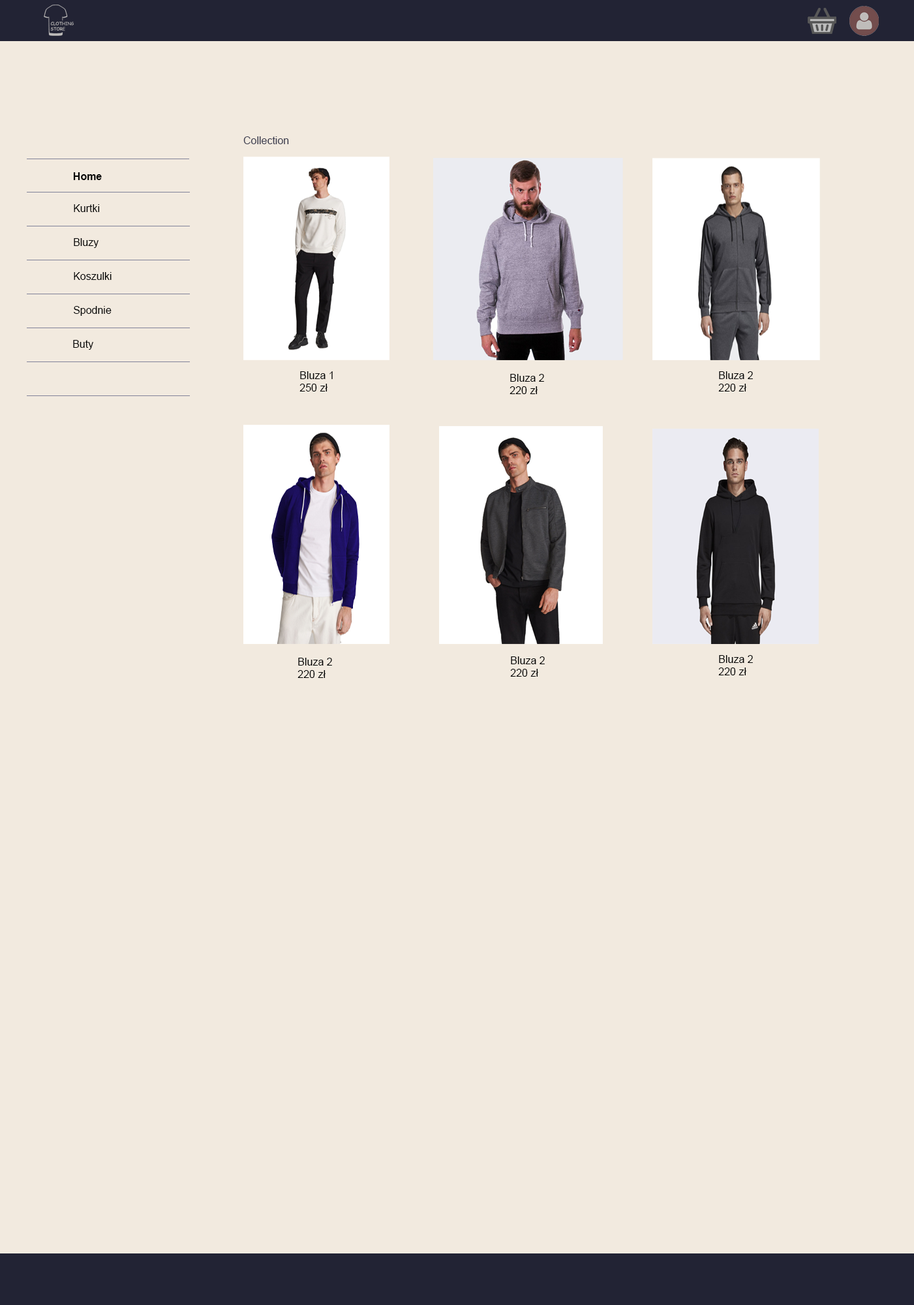
<style>
.page{position:relative;width:914px;height:1305px;background:#f2eadf}
.page>*{position:absolute;margin:0}
.t1{font:10.4px "ArialMT";color:#393a4d}
.t2{font:10.4px "Arial-BoldMT";color:#000000}
.t3{font:10.4px "ArialMT";color:#000000}
</style>
<div class="page">
<p class="t1" style="left:243px;top:136px;width:46px;height:8px">Collection</p>
<p class="t2" style="left:73px;top:172px;width:29px;height:8px">Home</p>
<p class="t3" style="left:74px;top:204px;width:26px;height:8px">Kurtki</p>
<p class="t3" style="left:74px;top:238px;width:25px;height:10px">Bluzy</p>
<p class="t3" style="left:74px;top:272px;width:38px;height:8px">Koszulki</p>
<p class="t3" style="left:74px;top:306px;width:38px;height:10px">Spodnie</p>
<p class="t3" style="left:73px;top:340px;width:20px;height:10px">Buty</p>
<p class="t3" style="left:299px;top:371px;width:34px;height:20px">Bluza 1<br>250 zł</p>
<p class="t3" style="left:509px;top:374px;width:35px;height:20px">Bluza 2<br>220 zł</p>
<p class="t3" style="left:718px;top:371px;width:35px;height:20px">Bluza 2<br>220 zł</p>
<p class="t3" style="left:297px;top:658px;width:35px;height:20px">Bluza 2<br>220 zł</p>
<p class="t3" style="left:510px;top:656px;width:35px;height:20px">Bluza 2<br>220 zł</p>
<p class="t3" style="left:718px;top:655px;width:35px;height:20px">Bluza 2<br>220 zł</p>
</div>
